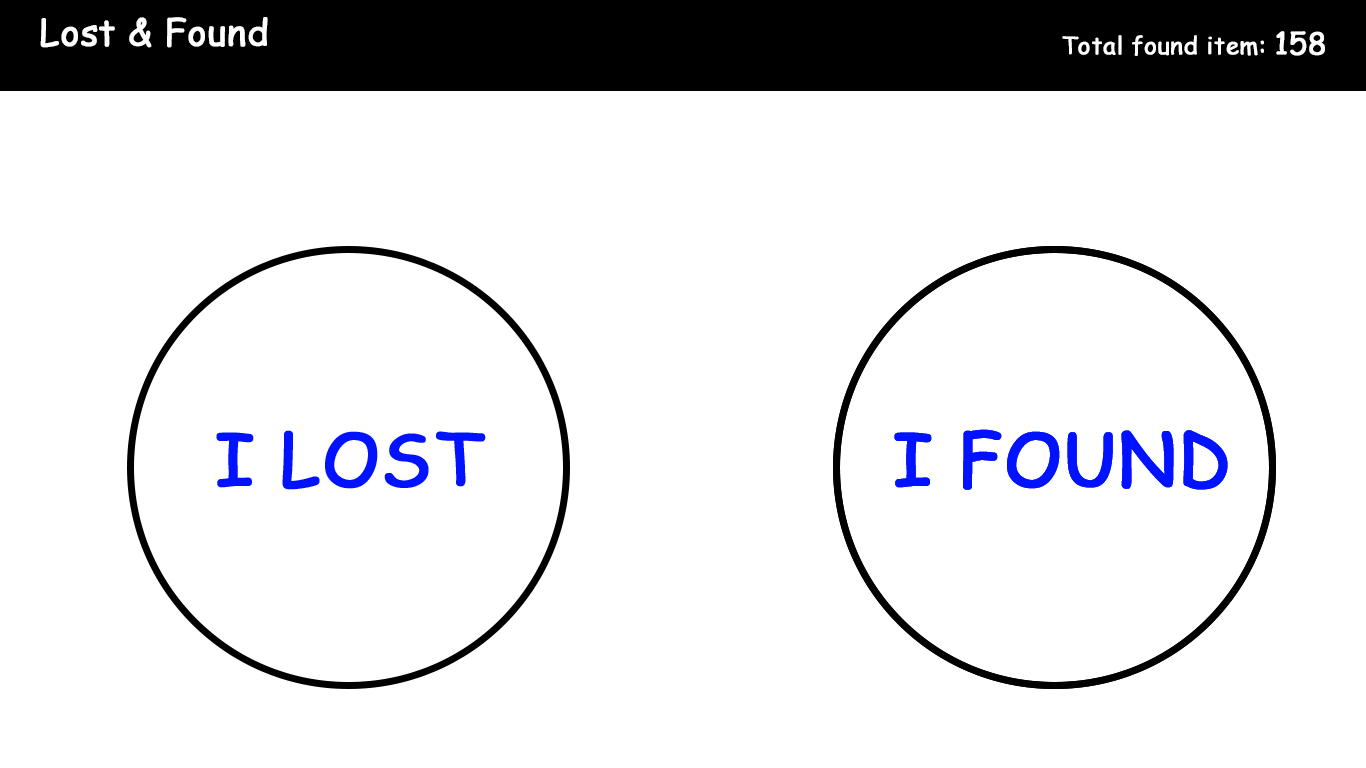
<style>
.page{position:relative;width:1366px;height:768px;background:#ffffff}
.page>*{position:absolute;margin:0}
.t1{font:36px "ComicSansMS";color:#ffffff;font-weight:bold}
.t2{font:24px "ComicSansMS";color:#ffffff;font-weight:bold}
.t3{font:30px "ComicSansMS";color:#ffffff;font-weight:bold}
</style>
<div class="page">
<p class="t1" style="left:40px;top:17px;width:228px;height:31px">Lost &amp; Found</p>
<p class="t2" style="left:1062px;top:31px;width:263px;height:25px">Total found item: <span class="t3">158</span></p>
</div>
